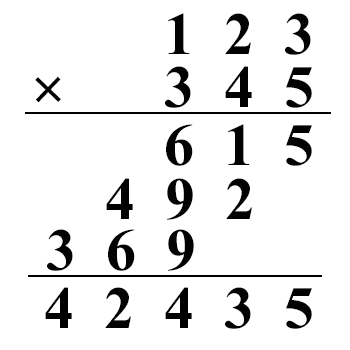
<style>
.page{position:relative;width:350px;height:350px;background:#ffffff}
.page>*{position:absolute;margin:0}
.t1{font:60px "TimesNewRomanPS-BoldMT";color:#020202}
</style>
<div class="page">
<p class="t1" style="left:168px;top:13px;width:143px;height:42px">1  2  3</p>
<p class="t1" style="left:35px;top:76px;width:26px;height:27px;rotate:44deg">+</p>
<p class="t1" style="left:165px;top:66px;width:147px;height:42px">3  4  5</p>
<p class="t1" style="left:166px;top:124px;width:146px;height:42px">6  1  5</p>
<p class="t1" style="left:106px;top:178px;width:146px;height:42px">4  9  2</p>
<p class="t1" style="left:47px;top:229px;width:147px;height:42px">3  6  9</p>
<p class="t1" style="left:45px;top:287px;width:267px;height:42px">4  2  4  3  5</p>
</div>
